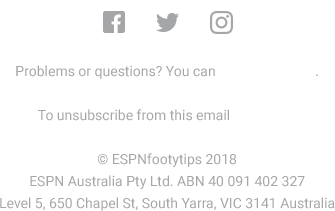
<style>
.page{position:relative;width:335px;height:211px;background:#ffffff}
.page>*{position:absolute;margin:0}
.t1{font:14px/22px "Roboto-Regular";color:#a5a6a7}
.t2{font:14px/22px "Roboto-Regular";color:#ffffff}
</style>
<div class="page">
<p class="t1" style="left:0px;top:65px;width:335px;height:146px;text-align:center">Problems or questions? You can <span class="t2">contact us here</span>.<br><br>To unsubscribe from this email <span class="t2">click here.<br><br></span>© ESPNfootytips 2018<br>ESPN Australia Pty Ltd. ABN 40 091 402 327<br>Level 5, 650 Chapel St, South Yarra, VIC 3141 Australia</p>
</div>
